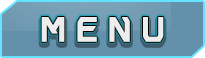
<style>
.page{position:relative;width:205px;height:58px;background:#6391ab}
.page>*{position:absolute;margin:0}
.t1{font:33.5px "VoyagerGrotesqueBold";letter-spacing:0.3em;color:#ffffff}
</style>
<div class="page">
<p class="t1" style="left:41px;top:17px;width:123px;height:25px">MENU</p>
</div>
